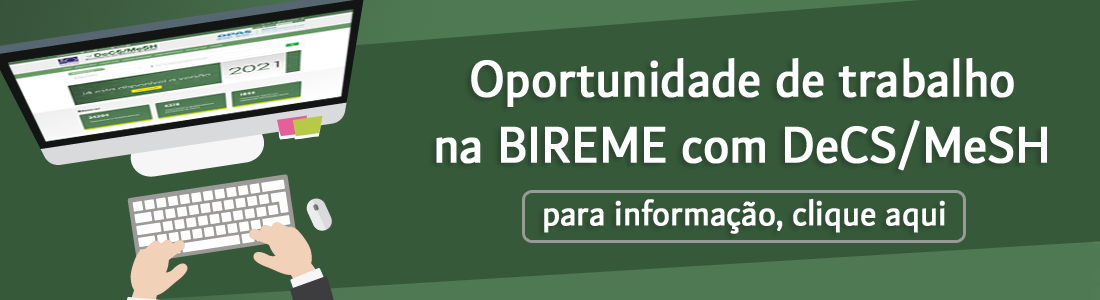
<style>
.page{position:relative;width:1100px;height:300px;background:#36593a}
.page>*{position:absolute;margin:0}
.t1{font:54.5px "Dubai-Regular";color:#ffffff;font-weight:bold;scale:0.9 1}
.t2{font:37.2px "Dubai-Regular";color:#ffffff;font-weight:bold;scale:0.9 1}
</style>
<div class="page">
<p class="t1" style="left:436px;top:58px;width:611px;height:113px;text-align:center">Oportunidade de trabalho<br>na BIREME com DeCS/MeSH</p>
<p class="t2" style="left:544px;top:199px;width:401px;height:35px">para informação, clique aqui</p>
</div>
